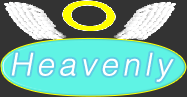
<style>
.page{position:relative;width:187px;height:97px;background:#333333}
.page>*{position:absolute;margin:0}
.t1{font:31px "HelvLight-Normal";letter-spacing:0.15em;color:#ffffff;font-style:italic}
</style>
<div class="page">
<p class="t1" style="left:11px;top:52px;width:163px;height:30px">Heavenly</p>
</div>
